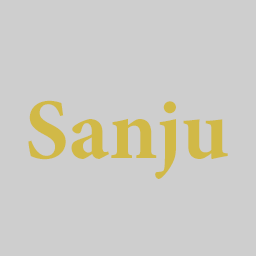
<style>
.page{position:relative;width:256px;height:256px;background:#cecece}
.page>*{position:absolute;margin:0}
.t1{font:86.1px "MinionPro-Bold";color:#d1b947}
</style>
<div class="page">
<p class="t1" style="left:28px;top:100px;width:200px;height:79px">Sanju</p>
</div>
